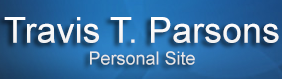
<style>
.page{position:relative;width:282px;height:79px}
.page>*{position:absolute;margin:0}
.t1{font:36px "ArialMT";color:#fefefe}
.t2{font:18px "ArialMT";color:#fefefe}
</style>
<div class="page">
<p class="t1" style="left:4px;top:17px;width:275px;height:48px;text-align:center">Travis T. Parsons<br><span class="t2">Personal Site</span></p>
</div>
